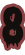
<style>
.page{position:relative;width:25px;height:55px;background:#130f0c}
.page>*{position:absolute;margin:0}
.t1{font:45.8px "CSNPWDTNFI";color:#130f0c}
</style>
<div class="page">
<p class="t1" style="left:2px;top:6px;width:22px;height:42px">8</p>
</div>
